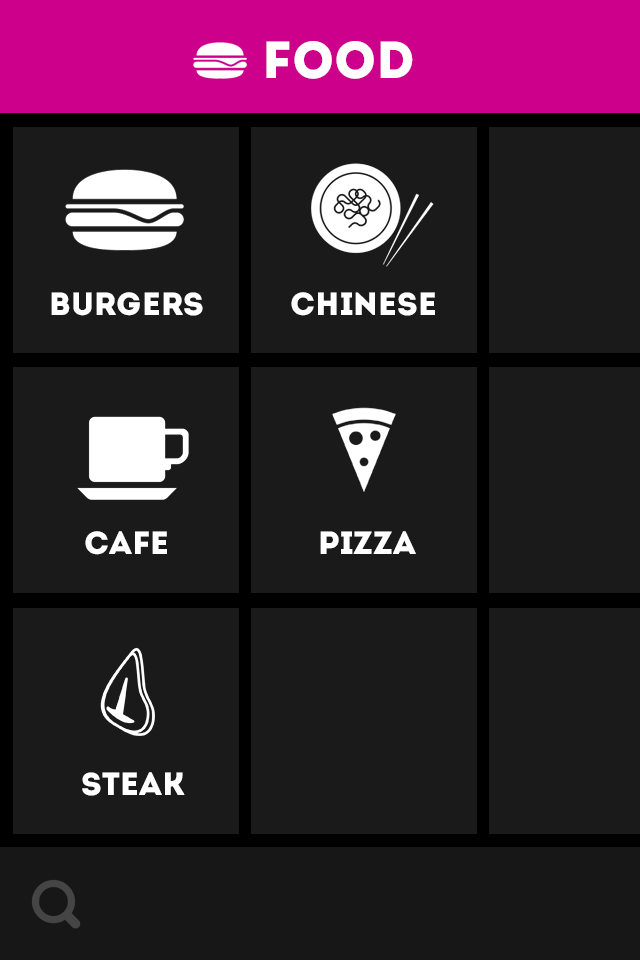
<style>
.page{position:relative;width:640px;height:960px;background:#1a1a1a}
.page>*{position:absolute;margin:0}
.t1{font:52px "Intro";color:#ffffff}
.t2{font:32px "Intro";color:#ffffff}
</style>
<div class="page">
<p class="t1" style="left:266px;top:41px;width:147px;height:38px">FOOD</p>
<p class="t2" style="left:51px;top:292px;width:152px;height:24px">BURGERS</p>
<p class="t2" style="left:291px;top:292px;width:144px;height:24px">CHINESE</p>
<p class="t2" style="left:85px;top:531px;width:82px;height:24px">CAFE</p>
<p class="t2" style="left:320px;top:531px;width:96px;height:23px">PIZZA</p>
<p class="t2" style="left:82px;top:772px;width:103px;height:24px">STEAK</p>
</div>
